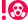
<style>
.page{position:relative;width:28px;height:20px;background:#ffffff}
.page>*{position:absolute;margin:0}
.t1{font:26.7px "Monofonto-Regular";color:#ff0049}
</style>
<div class="page">
<p class="t1" style="left:1px;top:0px;width:5px;height:20px">!</p>
</div>
